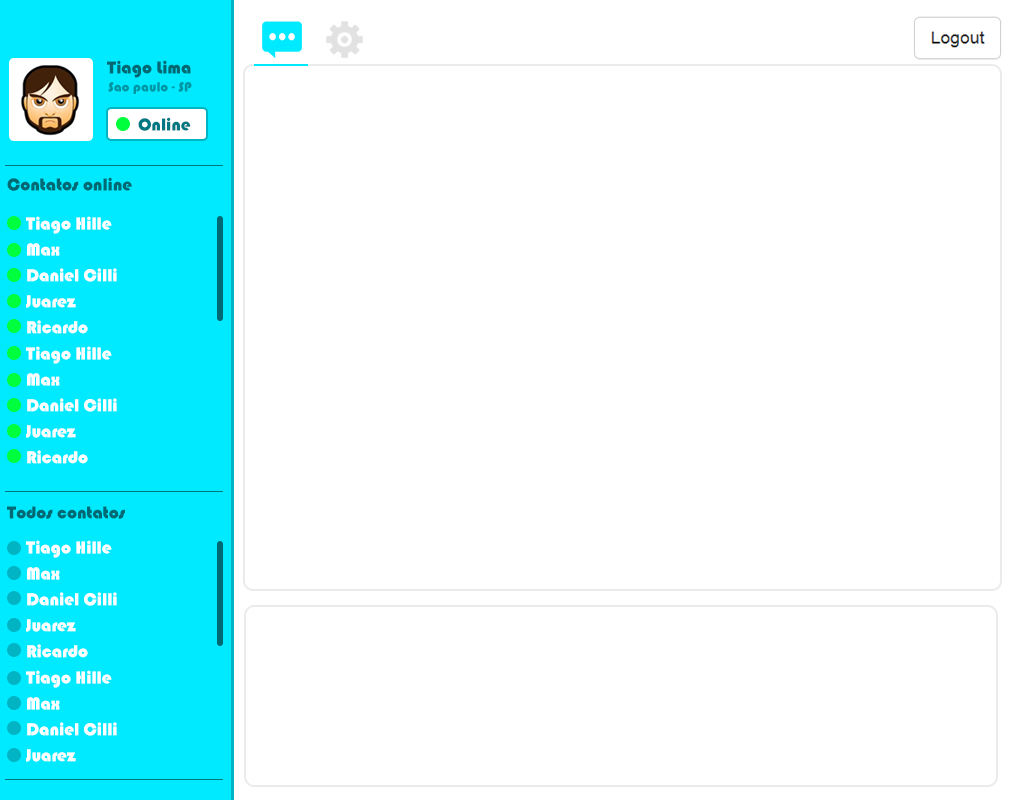
<style>
.page{position:relative;width:1024px;height:800px;background:#ffffff}
.page>*{position:absolute;margin:0}
.t1{font:18px "Bauhaus93";color:#016973}
.t2{font:14px "Bauhaus93";color:#0097a4}
.t3{font:18px "Bauhaus93";color:#007883}
.t4{font:18px/25.9px "Bauhaus93";color:#ffffff}
</style>
<div class="page">
<p class="t1" style="left:107px;top:60px;width:84px;height:18px">Tiago Lima</p>
<p class="t2" style="left:108px;top:82px;width:84px;height:12px">Sao paulo - SP</p>
<p class="t3" style="left:138px;top:117px;width:53px;height:14px">Online</p>
<p class="t1" style="left:7px;top:177px;width:125px;height:14px">Contatos online</p>
<p class="t4" style="left:26px;top:216px;width:91px;height:118px">Tiago Hille<br>Max<br>Daniel Cilli<br>Juarez<br>Ricardo</p>
<p class="t4" style="left:26px;top:346px;width:91px;height:118px">Tiago Hille<br>Max<br>Daniel Cilli<br>Juarez<br>Ricardo</p>
<p class="t1" style="left:7px;top:506px;width:118px;height:13px">Todos contatos</p>
<p class="t4" style="left:26px;top:540px;width:91px;height:118px">Tiago Hille<br>Max<br>Daniel Cilli<br>Juarez<br>Ricardo</p>
<p class="t4" style="left:26px;top:670px;width:91px;height:92px">Tiago Hille<br>Max<br>Daniel Cilli<br>Juarez</p>
</div>
